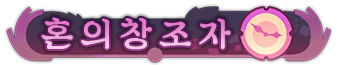
<style>
.page{position:relative;width:338px;height:65px;background:#ffffff}
.page>*{position:absolute;margin:0}
.t1{font:35px "SDKukdetopokki-aLt";letter-spacing:0.2em}
</style>
<div class="page">
<p class="t1" style="left:41px;top:17px;width:190px;height:33px">혼의창조자</p>
</div>
